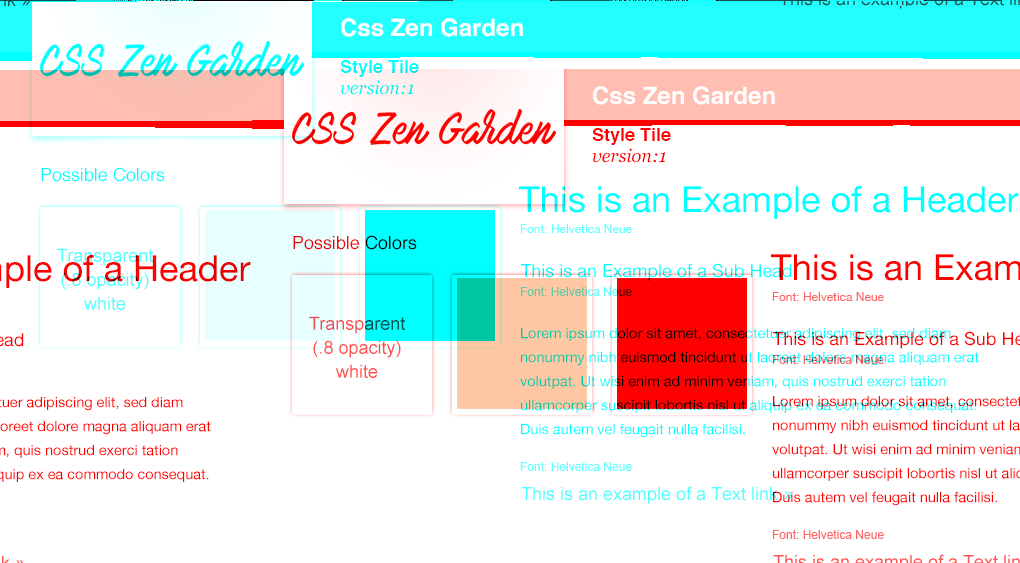
<style>
.page{position:relative;width:1020px;height:563px;background:#ffffff}
.page>*{position:absolute;margin:0}
.t1{font:24px "Helvetica-Bold";color:#ffffff}
.t2{font:18px "Helvetica-Bold"}
.t3{font:18px "Georgia-Italic"}
.t4{font:18px "Helvetica"}
.t5{font:36px "HelveticaNeue";color:#00ffff}
.t6{font:12px "HelveticaNeue"}
.t7{font:18px/24px "ArialMT"}
.t8{font:18px "HelveticaNeue"}
.t9{font:12px "ArialMT"}
.t10{font:14.5px/24px "HelveticaNeue"}
.t11{font:18px "ArialMT"}
</style>
<div class="page">
<p class="t1" style="left:341px;top:17px;width:182px;height:19px">Css Zen Garden</p>
<p class="t2" style="left:340px;top:59px;width:79px;height:17px">Style Tile</p>
<p class="t3" style="left:340px;top:79px;width:74px;height:15px">version:1</p>
<p class="t4" style="left:41px;top:166px;width:124px;height:15px">Possible Colors</p>
<p class="t5" style="left:519px;top:185px;width:500px;height:33px">This is an Example of a Header</p>
<p class="t6" style="left:520px;top:223px;width:112px;height:9px">Font: Helvetica Neue</p>
<p class="t7" style="left:57px;top:247px;width:97px;height:62px;text-align:center">Transparent <br>(.8 opacity) white</p>
<p class="t8" style="left:521px;top:262px;width:271px;height:18px">This is an Example of a Sub Head</p>
<p class="t9" style="left:520px;top:286px;width:112px;height:9px">Font: Helvetica Neue</p>
<p class="t10" style="left:520px;top:327px;width:459px;height:110px">Lorem ipsum dolor sit amet, consectetuer adipiscing elit, sed diam nonummy nibh euismod tincidunt ut laoreet dolore magna aliquam erat volutpat. Ut wisi enim ad minim veniam, quis nostrud exerci tation ullamcorper suscipit lobortis nisl ut aliquip ex ea commodo consequat. Duis autem vel feugait nulla facilisi.</p>
<p class="t9" style="left:520px;top:461px;width:112px;height:9px">Font: Helvetica Neue</p>
<p class="t11" style="left:521px;top:485px;width:271px;height:18px">This is an example of a Text link »</p>
</div>
